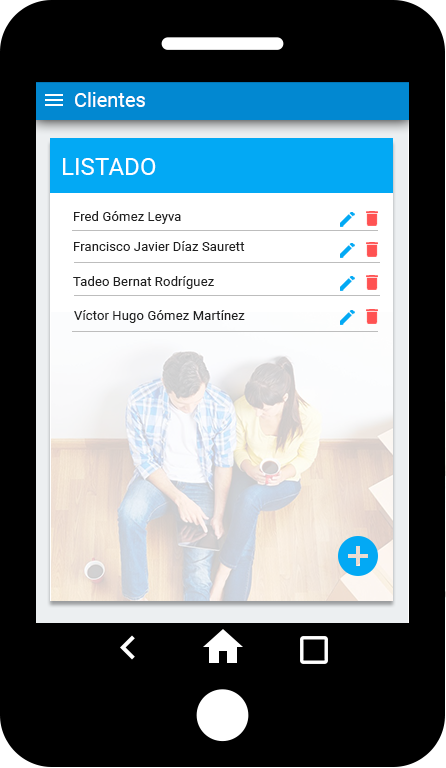
<style>
.page{position:relative;width:446px;height:768px;background:#000000}
.page>*{position:absolute;margin:0}
.t1{font:20px "Roboto-Regular";color:#ffffff}
.t2{font:24px "Roboto-Regular";color:#ffffff}
.t3{font:13.3px "Roboto-Regular";color:#212121}
</style>
<div class="page">
<p class="t1" style="left:75px;top:92px;width:70px;height:15px">Clientes</p>
<p class="t2" style="left:63px;top:158px;width:93px;height:17px">LISTADO</p>
<p class="t3" style="left:74px;top:211px;width:107px;height:13px">Fred Gómez Leyva</p>
<p class="t3" style="left:74px;top:241px;width:171px;height:10px">Francisco Javier Díaz Saurett</p>
<p class="t3" style="left:73px;top:276px;width:141px;height:13px">Tadeo Bernat Rodríguez</p>
<p class="t3" style="left:74px;top:310px;width:171px;height:13px">Víctor Hugo Gómez Martínez</p>
</div>
